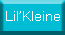
<style>
.page{position:relative;width:65px;height:35px;background:#00bcd4}
.page>*{position:absolute;margin:0}
.t1{font:14px "MicrosoftSansSerif";color:#ffffff}
</style>
<div class="page">
<p class="t1" style="left:6px;top:11px;width:54px;height:10px">Lil’Kleine</p>
</div>
